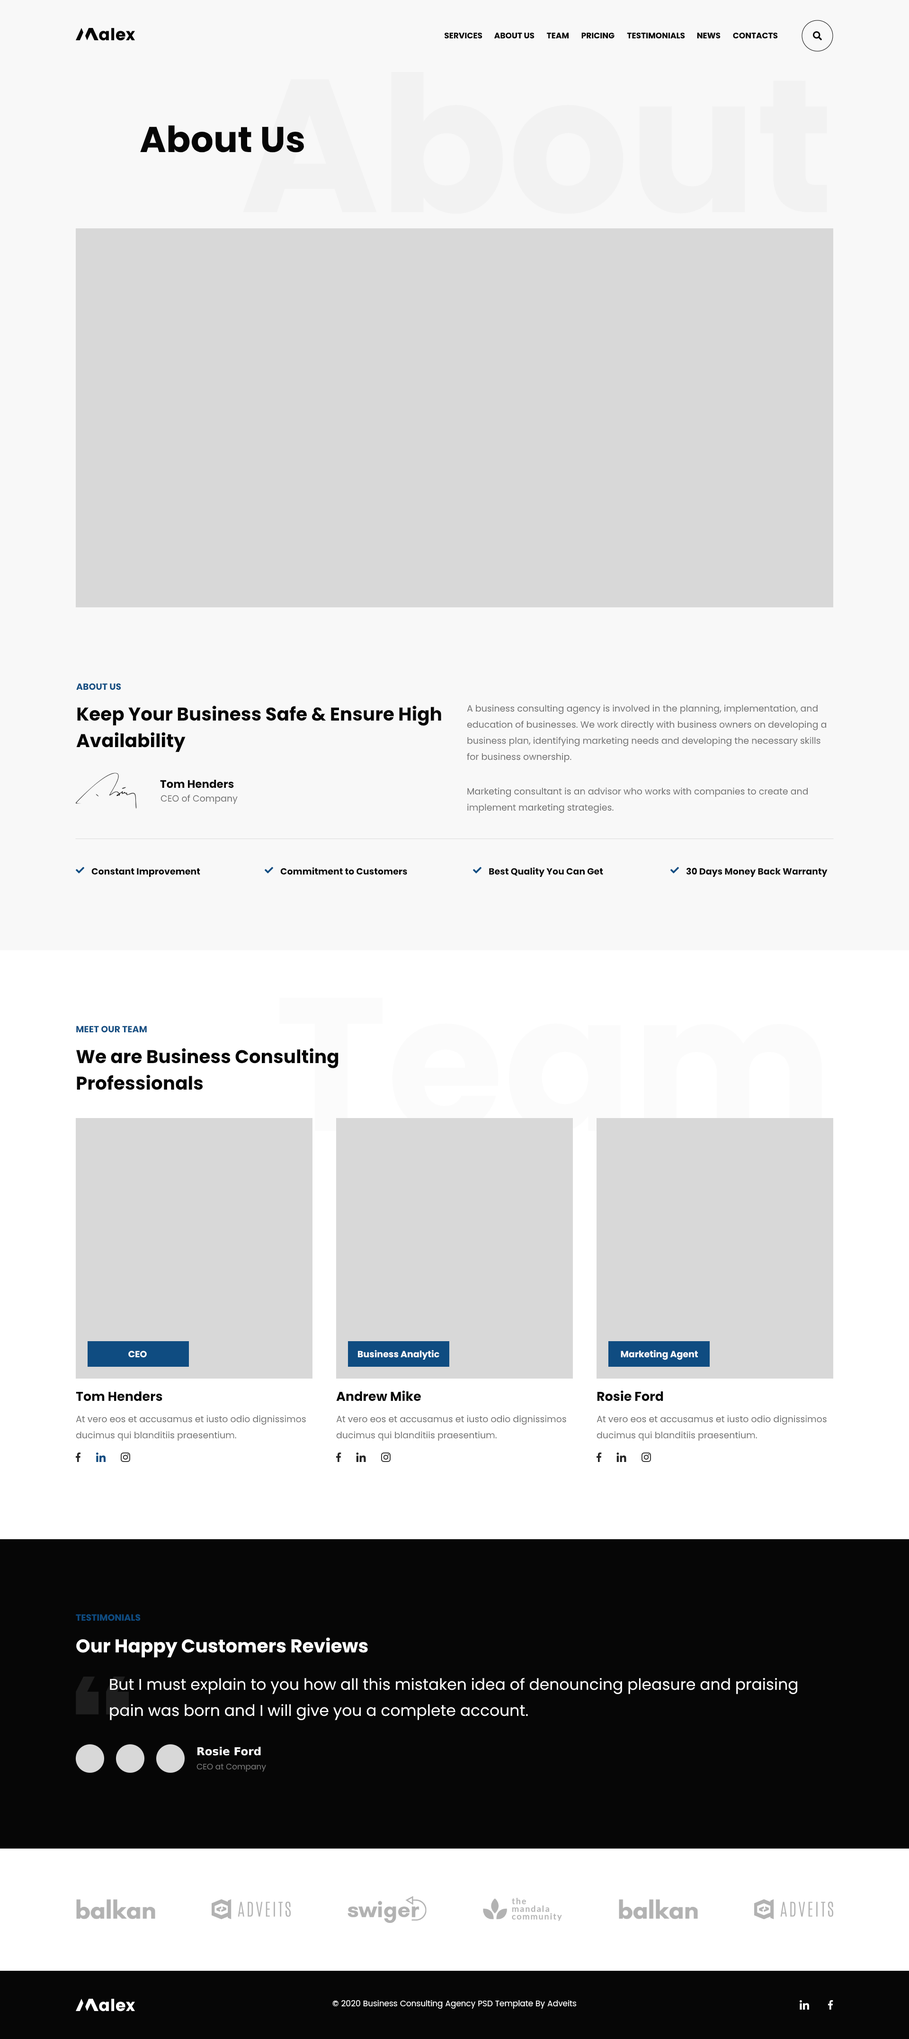
<style>
.page{position:relative;width:909px;height:2039px;background:#f8f8f8}
.page>*{position:absolute;margin:0}
.t1{font:8.1px "Poppins-Bold";color:#060606}
.t2{font:36px "Poppins-Bold";color:#060606}
.t3{font:9px "Poppins-Bold";color:#0f4c81}
.t4{font:18.5px/26.5px "Poppins-Bold";color:#060606}
.t5{font:9px/16.1px "Poppins-Regular";color:#6c6c6c}
.t6{font:10.9px "Poppins-Bold";color:#060606}
.t7{font:9px "Poppins-Regular";color:#6c6c6c}
.t8{font:9px "Poppins-Bold";color:#060606}
.t9{font:9px "Poppins-Bold";color:#ffffff}
.t10{font:12.8px "Poppins-Bold";color:#060606}
.t11{font:18.5px "Poppins-Bold";color:#ffffff}
.t12{font:15.6px/26.1px "Poppins-Regular";color:#ffffff}
.t13{font:10.9px "DMSans-Bold";color:#ffffff}
.t14{font:8.1px "Poppins-Regular";color:#777777}
.t15{font:8.1px "Poppins-Regular";color:#ffffff}
</style>
<div class="page">
<p class="t1" style="left:444px;top:32px;width:39px;height:7px">SERVICES</p>
<p class="t1" style="left:495px;top:33px;width:40px;height:5px">ABOUT US</p>
<p class="t1" style="left:547px;top:33px;width:22px;height:5px">TEAM</p>
<p class="t1" style="left:582px;top:33px;width:33px;height:5px">PRICING</p>
<p class="t1" style="left:627px;top:33px;width:58px;height:5px">TESTIMONIALS</p>
<p class="t1" style="left:697px;top:33px;width:24px;height:5px">NEWS</p>
<p class="t1" style="left:733px;top:33px;width:45px;height:5px">CONTACTS</p>
<p class="t2" style="left:140px;top:125px;width:164px;height:28px">About Us</p>
<p class="t3" style="left:76px;top:683px;width:45px;height:7px">ABOUT US</p>
<p class="t4" style="left:76px;top:705px;width:365px;height:47px">Keep Your Business Safe &amp; Ensure High Availability</p>
<p class="t5" style="left:467px;top:704px;width:360px;height:58px">A business consulting agency is involved in the planning, implementation, and education of businesses. We work directly with business owners on developing a business plan, identifying marketing needs and developing the necessary skills for business ownership.</p>
<p class="t6" style="left:160px;top:779px;width:74px;height:9px">Tom Henders</p>
<p class="t7" style="left:161px;top:794px;width:77px;height:10px">CEO of Company</p>
<p class="t5" style="left:468px;top:787px;width:341px;height:26px">Marketing consultant is an advisor who works with companies to create and implement marketing strategies.</p>
<p class="t8" style="left:91px;top:868px;width:109px;height:9px">Constant Improvement</p>
<p class="t8" style="left:280px;top:867px;width:127px;height:8px">Commitment to Customers</p>
<p class="t8" style="left:489px;top:867px;width:114px;height:10px">Best Quality You Can Get</p>
<p class="t8" style="left:686px;top:867px;width:142px;height:10px">30 Days Money Back Warranty</p>
<p class="t3" style="left:76px;top:1026px;width:71px;height:7px">MEET OUR TEAM</p>
<p class="t4" style="left:76px;top:1048px;width:263px;height:42px">We are Business Consulting Professionals</p>
<p class="t9" style="left:358px;top:1350px;width:82px;height:10px">Business Analytic</p>
<p class="t9" style="left:621px;top:1350px;width:77px;height:10px">Marketing Agent</p>
<p class="t9" style="left:128px;top:1350px;width:19px;height:8px">CEO</p>
<p class="t10" style="left:76px;top:1391px;width:86px;height:10px">Tom Henders</p>
<p class="t10" style="left:336px;top:1390px;width:86px;height:11px">Andrew Mike</p>
<p class="t10" style="left:597px;top:1390px;width:67px;height:11px">Rosie Ford</p>
<p class="t5" style="left:76px;top:1415px;width:230px;height:25px">At vero eos et accusamus et iusto odio dignissimos ducimus qui blanditiis praesentium.</p>
<p class="t5" style="left:336px;top:1415px;width:231px;height:25px">At vero eos et accusamus et iusto odio dignissimos ducimus qui blanditiis praesentium.</p>
<p class="t5" style="left:597px;top:1415px;width:230px;height:25px">At vero eos et accusamus et iusto odio dignissimos ducimus qui blanditiis praesentium.</p>
<p class="t3" style="left:76px;top:1614px;width:65px;height:7px">TESTIMONIALS</p>
<p class="t11" style="left:76px;top:1637px;width:292px;height:20px">Our Happy Customers Reviews</p>
<p class="t12" style="left:110px;top:1677px;width:688px;height:43px">But I must explain to you how all this mistaken idea of denouncing pleasure and praising pain was born and I will give you a complete account.</p>
<p class="t13" style="left:198px;top:1746px;width:63px;height:9px">Rosie Ford</p>
<p class="t14" style="left:197px;top:1763px;width:69px;height:9px">CEO at Company</p>
<p class="t15" style="left:333px;top:2000px;width:244px;height:8px">© 2020 Business Consulting Agency PSD Template By Adveits</p>
</div>
